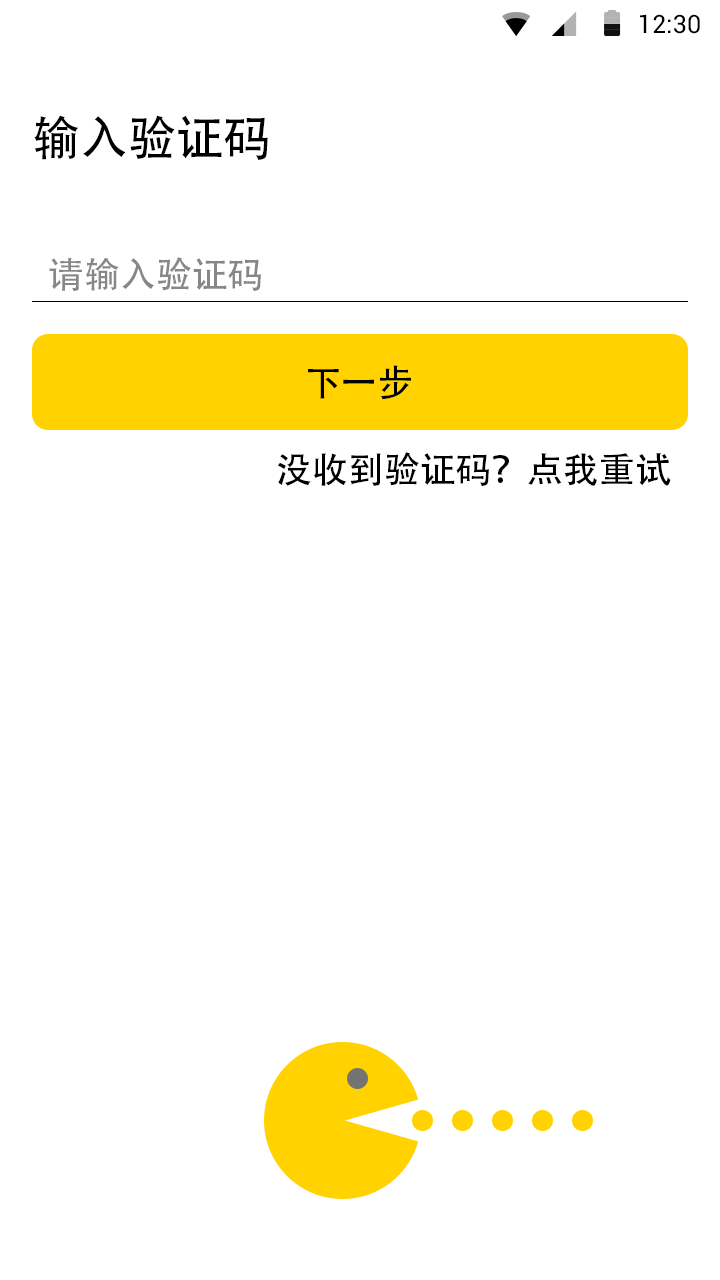
<style>
.page{position:relative;width:720px;height:1280px;background:#ffffff}
.page>*{position:absolute;margin:0}
.t1{font:25.4px "Roboto-Regular";color:#000000}
.t2{font:48px "AdobeHeitiStd-Regular";letter-spacing:-0.004em;color:#000000}
.t3{font:36px "AdobeHeitiStd-Regular";letter-spacing:-0.004em;color:#878787}
.t4{font:36px "AdobeHeitiStd-Regular";letter-spacing:-0.004em;color:#000000}
</style>
<div class="page">
<p class="t1" style="left:640px;top:14px;width:60px;height:20px">12:30</p>
<p class="t2" style="left:34px;top:115px;width:234px;height:45px">输入验证码</p>
<p class="t3" style="left:49px;top:257px;width:212px;height:34px">请输入验证码</p>
<p class="t4" style="left:308px;top:365px;width:103px;height:35px">下一步</p>
<p class="t4" style="left:278px;top:452px;width:393px;height:34px">没收到验证码？点我重试</p>
</div>
